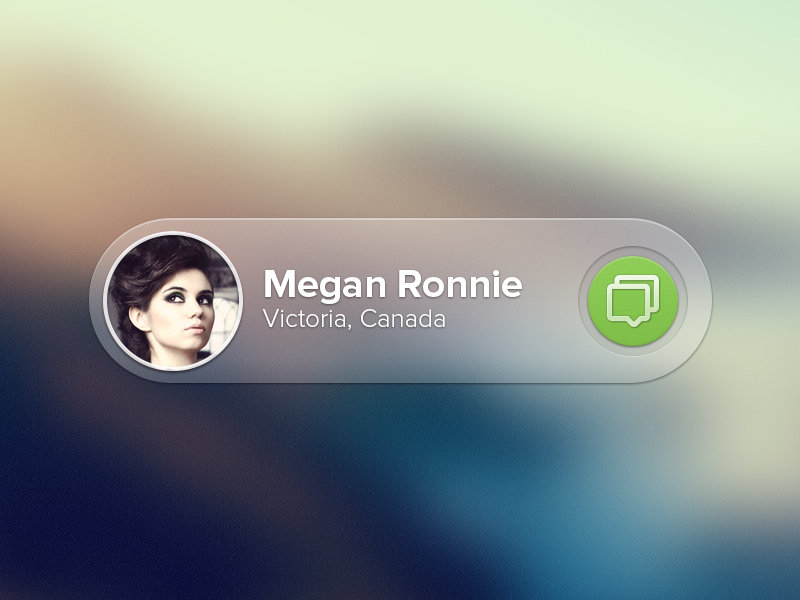
<style>
.page{position:relative;width:800px;height:600px}
.page>*{position:absolute;margin:0}
.t1{font:26px/30px "ProximaNova-Light";color:#ffffff}
.t2{font:40px/30px "ProximaNova-Bold";color:#ffffff}
</style>
<div class="page">
<p class="t1" style="left:262px;top:270px;width:260px;height:60px"><span class="t2">Megan Ronnie<br></span>Victoria, Canada</p>
</div>
